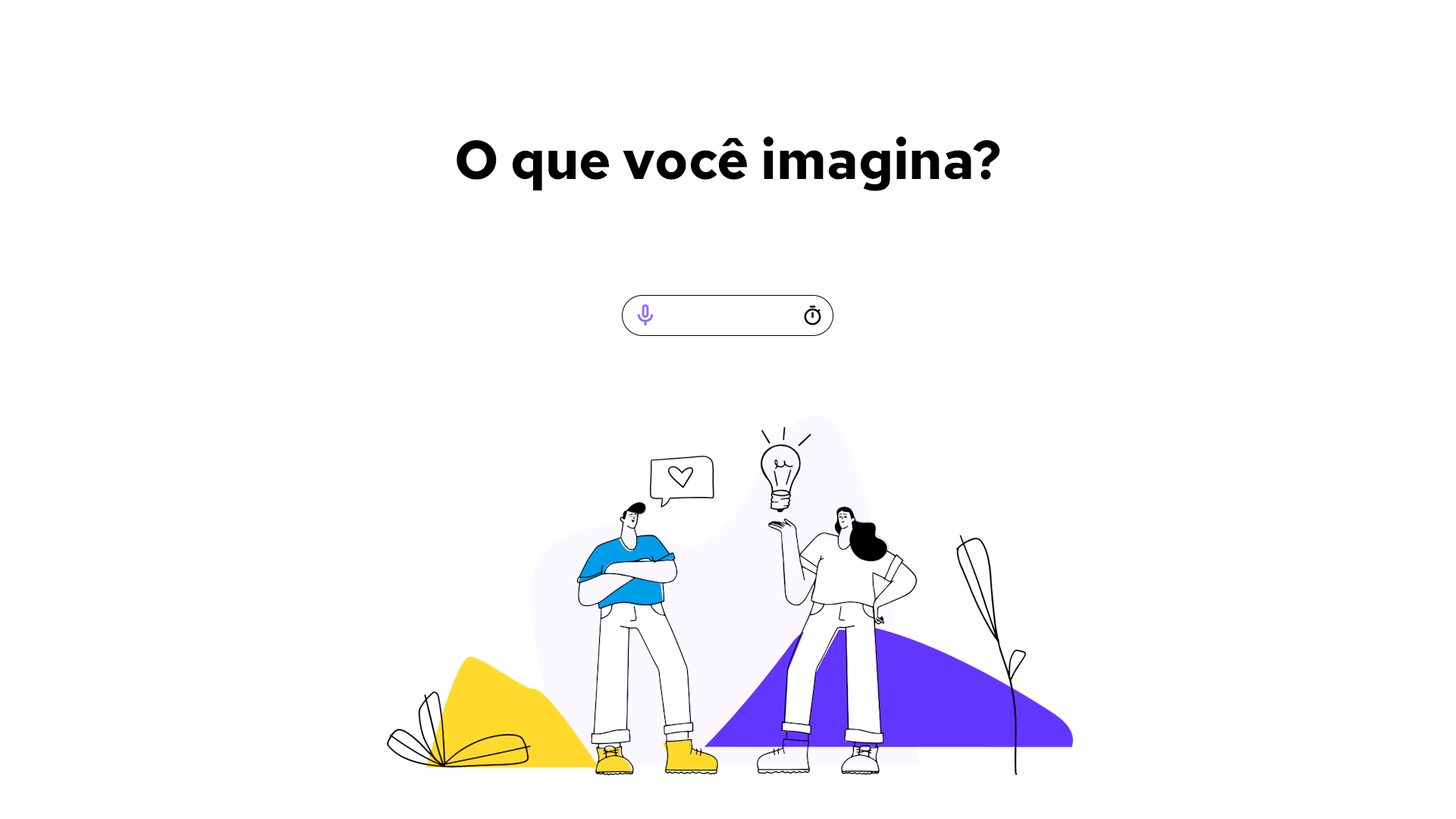
<style>
.page{position:relative;width:1456px;height:819px;background:#ffffff}
.page>*{position:absolute;margin:0}
.t1{font:54.6px "RedHatText-Bold";color:#000000}
</style>
<div class="page">
<p class="t1" style="left:457px;top:136px;width:543px;height:55px">O que você imagina?</p>
</div>
